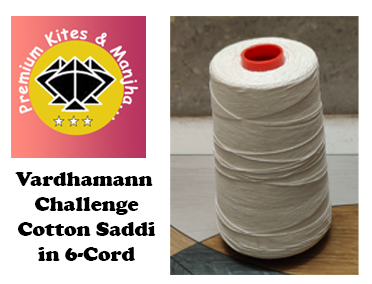
<style>
.page{position:relative;width:372px;height:284px;background:#ffffff}
.page>*{position:absolute;margin:0}
.t1{font:20.8px "CooperBlack";color:#000000}
</style>
<div class="page">
<p class="t1" style="left:15px;top:172px;width:141px;height:89px;text-align:center">Vardhamann <br>Challenge<br>Cotton Saddi<br>in 6-Cord</p>
</div>
